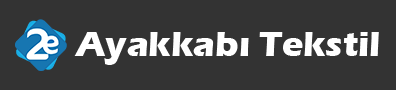
<style>
.page{position:relative;width:396px;height:90px;background:#333333}
.page>*{position:absolute;margin:0}
.t1{font:36px "ErasITC-Bold";color:#ffffff}
</style>
<div class="page">
<p class="t1" style="left:74px;top:32px;width:305px;height:33px">Ayakkabı Tekstil</p>
</div>
